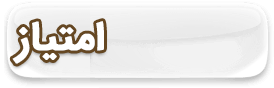
<style>
.page{position:relative;width:274px;height:88px}
.page>*{position:absolute;margin:0}
.t1{font:40px "IRANSansWeb-Bold";color:#ffffff;font-weight:bold}
</style>
<div class="page">
<p class="t1" style="left:12px;top:21px;width:92px;height:43px">امتیاز</p>
</div>
